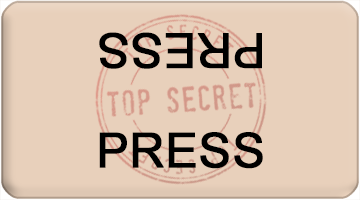
<style>
.page{position:relative;width:360px;height:200px;background:#e8d0bb}
.page>*{position:absolute;margin:0}
.t1{font:48px "ArialMT";color:#000000;font-weight:bold}
</style>
<div class="page">
<p class="t1" style="left:99px;top:32px;width:163px;height:37px;rotate:180deg">PRESS</p>
<p class="t1" style="left:99px;top:132px;width:164px;height:37px">PRESS</p>
</div>
